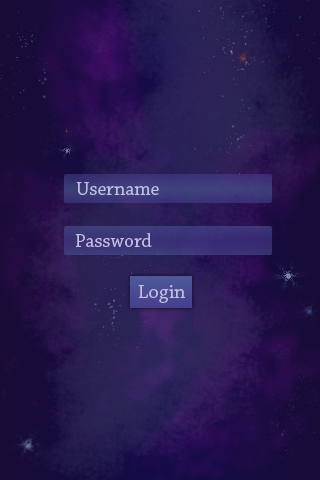
<style>
.page{position:relative;width:320px;height:480px}
.page>*{position:absolute;margin:0}
.t1{font:20px "ChaparralPro-Regular";color:#c3bfe1}
</style>
<div class="page">
<p class="t1" style="left:76px;top:182px;width:83px;height:13px">Username</p>
<p class="t1" style="left:75px;top:233px;width:77px;height:14px">Password</p>
<p class="t1" style="left:138px;top:285px;width:47px;height:18px">Login</p>
</div>
